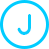
<style>
.page{position:relative;width:49px;height:49px;background:#ffffff}
.page>*{position:absolute;margin:0}
.t1{font:29.5px "Quicksand-Bold";letter-spacing:0.1em;color:#06cdff;scale:0.94 1}
</style>
<div class="page">
<p class="t1" style="left:17px;top:14px;width:14px;height:21px">J</p>
</div>
